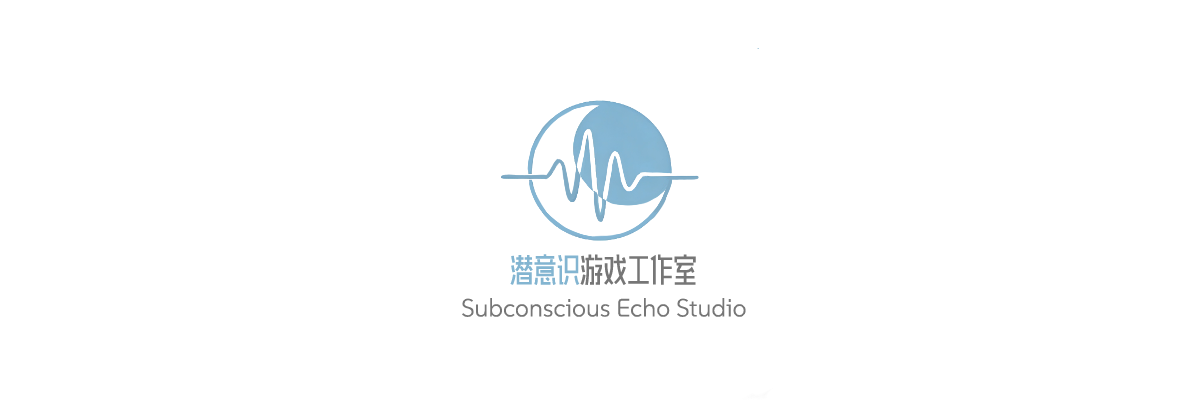
<style>
.page{position:relative;width:1200px;height:400px;background:#ffffff}
.page>*{position:absolute;margin:0}
.t1{font:33.3px "AidianFengYaHeiChangTi";color:#767676}
.t2{font:33.3px "AidianFengYaHeiChangTi";color:#84b5d1}
.t3{font:25px "SUSE-Light";color:#767676}
</style>
<div class="page">
<p class="t1" style="left:510px;top:254px;width:186px;height:31px"><span class="t2">潜意识</span>游戏工作室</p>
<p class="t3" style="left:462px;top:298px;width:284px;height:19px">Subconscious Echo Studio</p>
</div>
